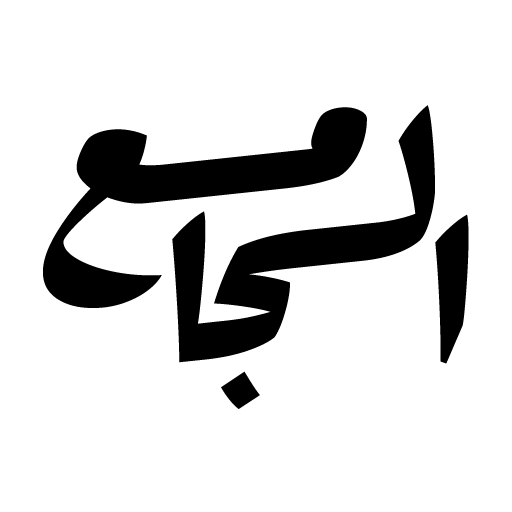
<style>
.page{position:relative;width:512px;height:512px;background:#ffffff}
.page>*{position:absolute;margin:0}
.t1{font:250px "Rakkas-Regular";color:#000000}
</style>
<div class="page">
<p class="t1" style="left:43px;top:107px;width:324px;height:201px">مــع</p>
<p class="t1" style="left:172px;top:105px;width:263px;height:304px">لـجا</p>
<p class="t1" style="left:435px;top:214px;width:34px;height:150px">ا</p>
</div>
